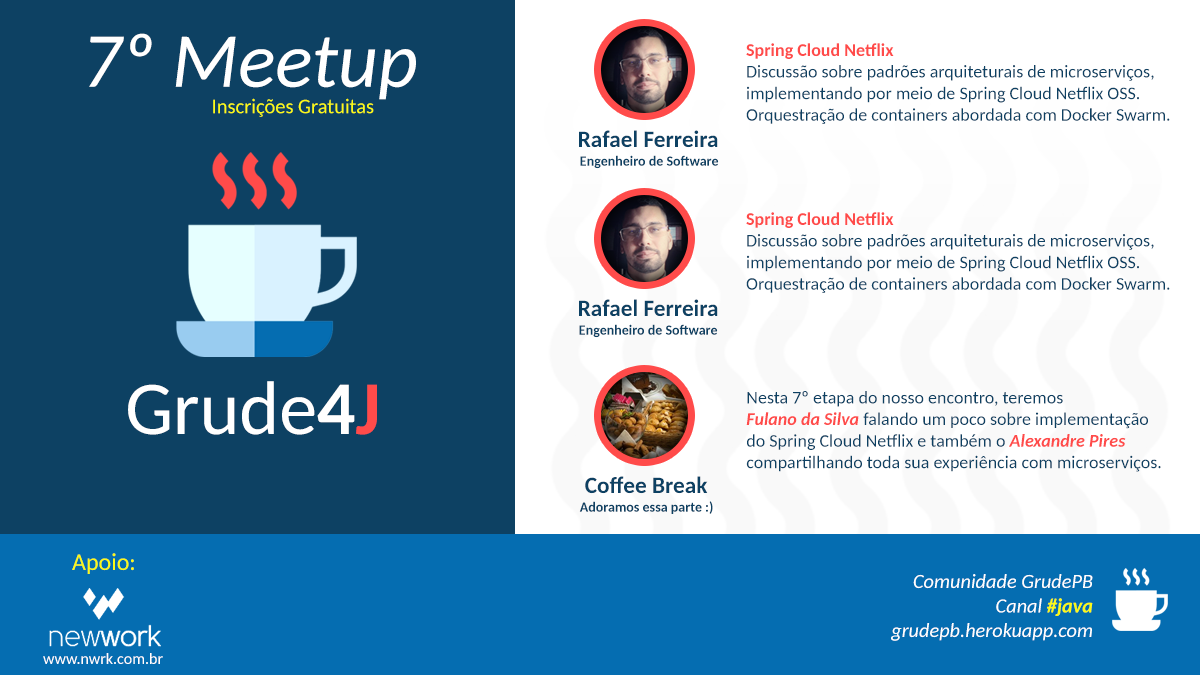
<style>
.page{position:relative;width:1200px;height:675px;background:#0d4163}
.page>*{position:absolute;margin:0}
.t1{font:77.7px "Carlito-Italic";color:#ffffff}
.t2{font:18px "Carlito";color:#0d4163}
.t3{font:18px "Carlito-Bold";color:#ff4b4a}
.t4{font:20.8px "Carlito";color:#fcfb14}
.t5{font:23.2px "Carlito-Bold";color:#0d4163}
.t6{font:13.9px "Carlito-Bold";color:#0d4163}
.t7{font:76.1px "Carlito";color:#ffffff}
.t8{font:76.1px "Carlito-Bold";color:#ffffff}
.t9{font:76.1px "Carlito-Bold";color:#ff4b4a}
.t10{font:18px "Carlito-BoldItalic";color:#ff4b4a}
.t11{font:24px "Carlito";color:#fcfb14}
.t12{font:20.4px "Carlito-Italic";color:#ffffff}
.t13{font:20.4px "Carlito-BoldItalic";color:#fcfb14}
.t14{font:16px "Carlito";color:#ffffff}
</style>
<div class="page">
<p class="t1" style="left:89px;top:33px;width:327px;height:67px">7º Meetup</p>
<p class="t2" style="left:746px;top:43px;width:424px;height:81px"><span class="t3">Spring Cloud Netflix<br></span>Discussão sobre padrões arquiteturais de microserviços,<br>implementando por meio de Spring Cloud Netflix OSS.<br>Orquestração de containers abordada com Docker Swarm.</p>
<p class="t4" style="left:213px;top:98px;width:161px;height:19px">Inscrições Gratuitas</p>
<p class="t5" style="left:579px;top:130px;width:139px;height:18px">Rafael Ferreira</p>
<p class="t6" style="left:580px;top:155px;width:139px;height:14px">Engenheiro de Software</p>
<p class="t2" style="left:746px;top:212px;width:424px;height:81px"><span class="t3">Spring Cloud Netflix<br></span>Discussão sobre padrões arquiteturais de microserviços,<br>implementando por meio de Spring Cloud Netflix OSS.<br>Orquestração de containers abordada com Docker Swarm.</p>
<p class="t5" style="left:579px;top:299px;width:139px;height:18px">Rafael Ferreira</p>
<p class="t6" style="left:579px;top:324px;width:139px;height:14px">Engenheiro de Software</p>
<p class="t7" style="left:128px;top:381px;width:249px;height:54px">Grude<span class="t8">4</span><span class="t9">J</span></p>
<p class="t2" style="left:746px;top:391px;width:415px;height:81px">Nesta 7º etapa do nosso encontro, teremos <br><span class="t10">Fulano da Silva</span> falando um poco sobre implementação do Spring Cloud Netflix e também o <span class="t10">Alexandre Pires</span> compartilhando toda sua experiência com microserviços.</p>
<p class="t5" style="left:585px;top:476px;width:123px;height:18px">Coffee Break</p>
<p class="t6" style="left:579px;top:501px;width:134px;height:13px">Adoramos essa parte :)</p>
<p class="t11" style="left:72px;top:553px;width:62px;height:21px">Apoio:</p>
<p class="t12" style="left:891px;top:574px;width:202px;height:67px;text-align:right">Comunidade GrudePB<br>Canal <span class="t13">#java<br></span>grudepb.herokuapp.com</p>
<p class="t14" style="left:43px;top:653px;width:120px;height:11px">www.nwrk.com.br</p>
</div>
